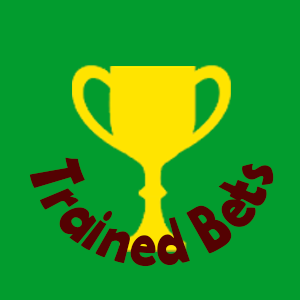
<style>
.page{position:relative;width:300px;height:300px;background:#029c2e}
.page>*{position:absolute;margin:0}
.t1{font:30px "BerlinSansFBDemi-Bold";color:#540202}
</style>
<div class="page">
<p class="t1" style="left:29px;top:157px;width:245px;height:110px">Trained Bets</p>
</div>
